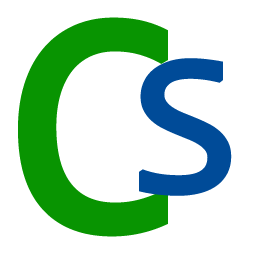
<style>
.page{position:relative;width:256px;height:256px;background:#ffffff}
.page>*{position:absolute;margin:0}
.t1{font:320px "Consolas";color:#089401;font-weight:bold}
.t2{font:200px "Consolas";color:#004b98;font-weight:bold}
</style>
<div class="page">
<p class="t1" style="left:18px;top:17px;width:150px;height:220px">C</p>
<p class="t2" style="left:139px;top:58px;width:93px;height:138px">S</p>
</div>
